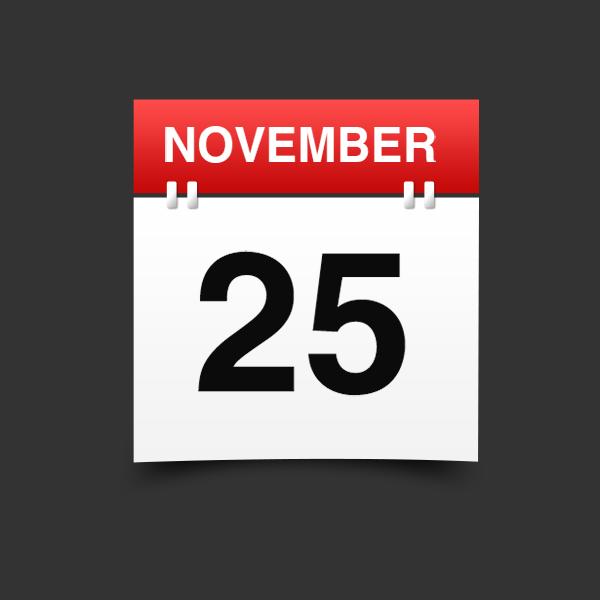
<style>
.page{position:relative;width:600px;height:600px;background:#333333}
.page>*{position:absolute;margin:0}
.t1{font:47.4px "HelveticaLTStd-Bold";color:#ffffff;text-transform:uppercase}
.t2{font:197.7px "HelveticaLTStd-Bold";color:#0c0b0c}
</style>
<div class="page">
<p class="t1" style="left:165px;top:126px;width:271px;height:37px">November</p>
<p class="t2" style="left:198px;top:250px;width:208px;height:147px">25</p>
</div>
